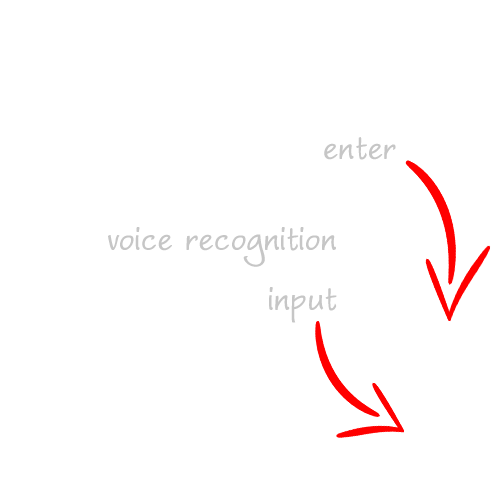
<style>
.page{position:relative;width:500px;height:500px;background:#ffffff}
.page>*{position:absolute;margin:0}
.t1{font:50px "WorstveldSlingBold";color:#c6c6c6}
</style>
<div class="page">
<p class="t1" style="left:324px;top:137px;width:72px;height:23px">enter</p>
<p class="t1" style="left:108px;top:227px;width:229px;height:96px">voice recognition<br>input</p>
</div>
